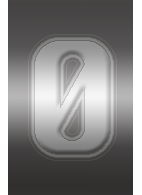
<style>
.page{position:relative;width:142px;height:195px}
.page>*{position:absolute;margin:0}
.t1{font:150px "Krungthep"}
</style>
<div class="page">
<p class="t1" style="left:35px;top:41px;width:75px;height:113px">0</p>
</div>
